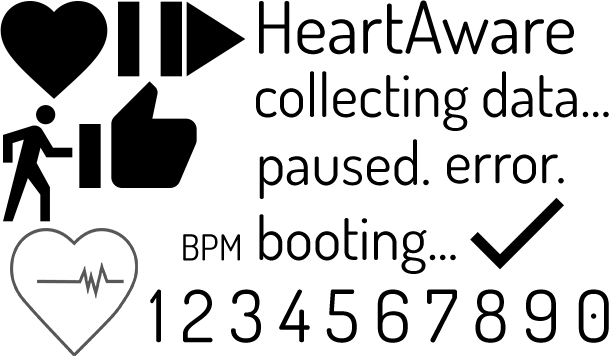
<style>
.page{position:relative;width:609px;height:356px;background:#ffffff}
.page>*{position:absolute;margin:0}
.t1{font:72px "Dosis-Regular";color:#000000}
.t2{font:60px "Dosis-Regular";color:#000000}
.t3{font:36px "Dosis-Regular";color:#000000}
</style>
<div class="page">
<p class="t1" style="left:259px;top:0px;width:315px;height:55px">HeartAware</p>
<p class="t2" style="left:256px;top:71px;width:353px;height:60px">collecting data...</p>
<p class="t2" style="left:259px;top:139px;width:170px;height:60px">paused.</p>
<p class="t2" style="left:447px;top:154px;width:117px;height:30px">error.</p>
<p class="t2" style="left:259px;top:214px;width:197px;height:60px">booting...</p>
<p class="t3" style="left:183px;top:234px;width:57px;height:27px">BPM</p>
<p class="t1" style="left:150px;top:289px;width:459px;height:54px">1 2 3 4 5 6 7 8 9 0</p>
</div>
